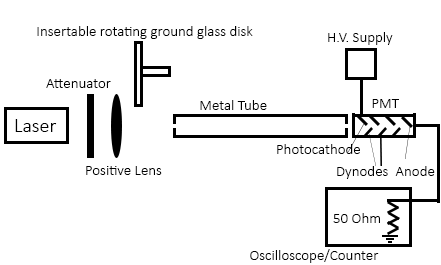
<style>
.page{position:relative;width:441px;height:265px;background:#ffffff}
.page>*{position:absolute;margin:0}
.t1{font:15px "Calibri-Light";color:#000000}
.t2{font:20px "Calibri-Light";color:#000000}
</style>
<div class="page">
<p class="t1" style="left:37px;top:26px;width:216px;height:13px">Insertable rotating ground glass disk</p>
<p class="t1" style="left:328px;top:32px;width:65px;height:13px">H.V. Supply</p>
<p class="t1" style="left:46px;top:79px;width:65px;height:9px">Attenuator</p>
<p class="t1" style="left:200px;top:100px;width:67px;height:10px">Metal Tube</p>
<p class="t1" style="left:372px;top:99px;width:27px;height:9px">PMT</p>
<p class="t2" style="left:15px;top:119px;width:42px;height:13px">Laser</p>
<p class="t1" style="left:277px;top:144px;width:83px;height:10px">Photocathode</p>
<p class="t1" style="left:86px;top:166px;width:76px;height:9px">Positive Lens</p>
<p class="t1" style="left:337px;top:166px;width:51px;height:13px">Dynodes</p>
<p class="t1" style="left:395px;top:166px;width:40px;height:10px">Anode</p>
<p class="t1" style="left:333px;top:213px;width:47px;height:10px">50 Ohm</p>
<p class="t1" style="left:250px;top:249px;width:129px;height:14px">Oscilloscope/Counter</p>
</div>
